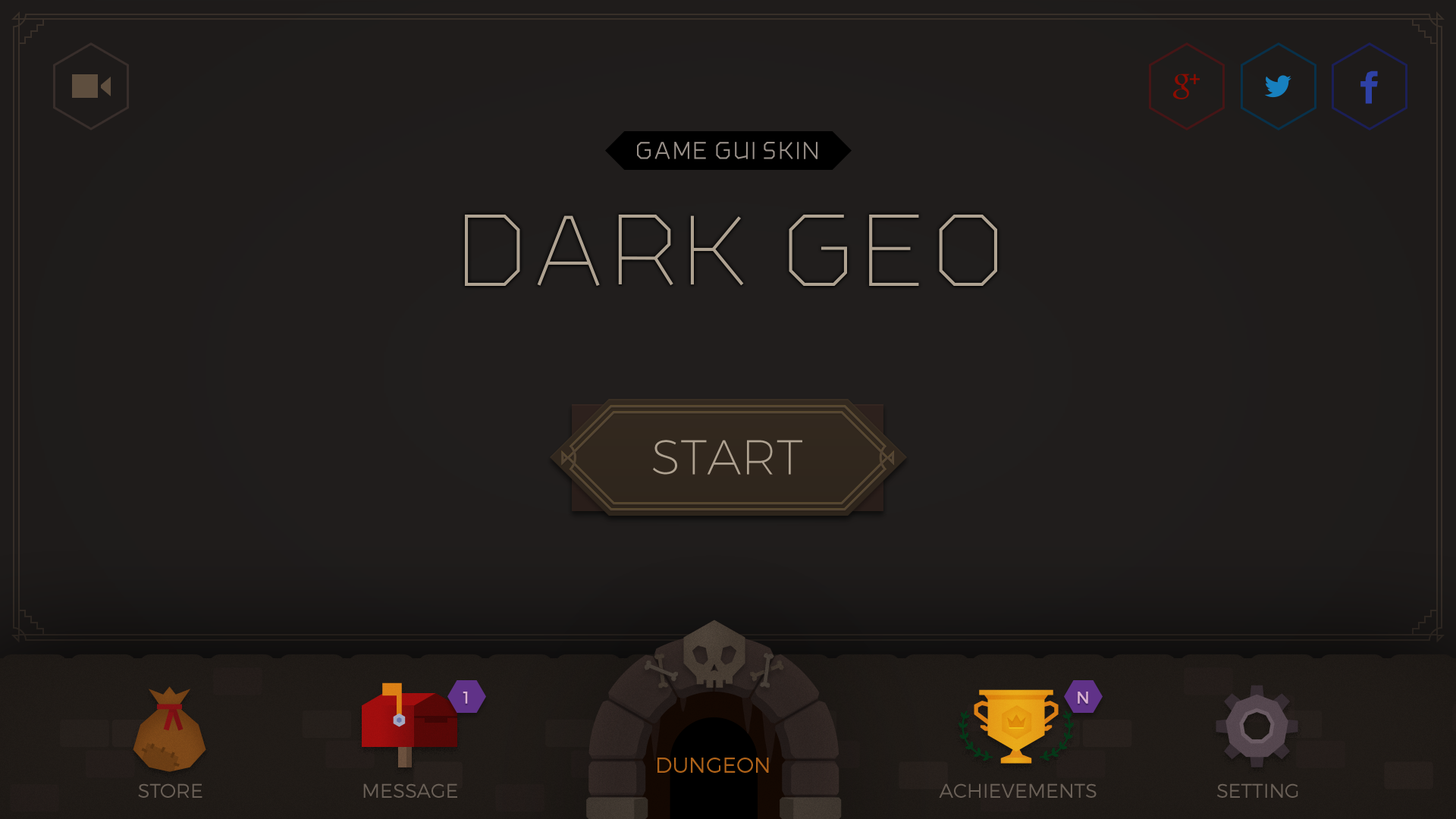
<style>
.page{position:relative;width:1456px;height:819px}
.page>*{position:absolute;margin:0}
.t1{font:48.9px "Montserrat-UltraLight";color:#aea190;text-transform:uppercase}
.t2{font:17.1px "Montserrat-Regular";color:#dab1d1;text-transform:uppercase}
.t3{font:21.6px "Montserrat-Light";color:#b1651a;text-transform:uppercase}
.t4{font:19.8px "Montserrat-Light";color:#6a6057;text-transform:uppercase}
</style>
<div class="page">
<p class="t1" style="left:653px;top:440px;width:149px;height:35px">START</p>
<p class="t2" style="left:463px;top:692px;width:5px;height:12px">1</p>
<p class="t2" style="left:1078px;top:692px;width:10px;height:12px">N</p>
<p class="t3" style="left:657px;top:758px;width:112px;height:15px">Dungeon</p>
<p class="t4" style="left:138px;top:783px;width:64px;height:15px">Store</p>
<p class="t4" style="left:363px;top:783px;width:94px;height:15px">Message</p>
<p class="t4" style="left:939px;top:783px;width:158px;height:15px">Achievements</p>
<p class="t4" style="left:1217px;top:783px;width:81px;height:15px">Setting</p>
</div>
